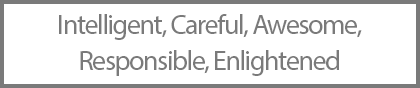
<style>
.page{position:relative;width:420px;height:88px;background:#ffffff}
.page>*{position:absolute;margin:0}
.t1{font:28px/36px "MyriadPro-Regular";letter-spacing:-0.05em;color:#7a7a7a}
</style>
<div class="page">
<p class="t1" style="left:59px;top:14px;width:303px;height:62px;text-align:center">Intelligent, Careful, Awesome, <br>Responsible, Enlightened</p>
</div>
